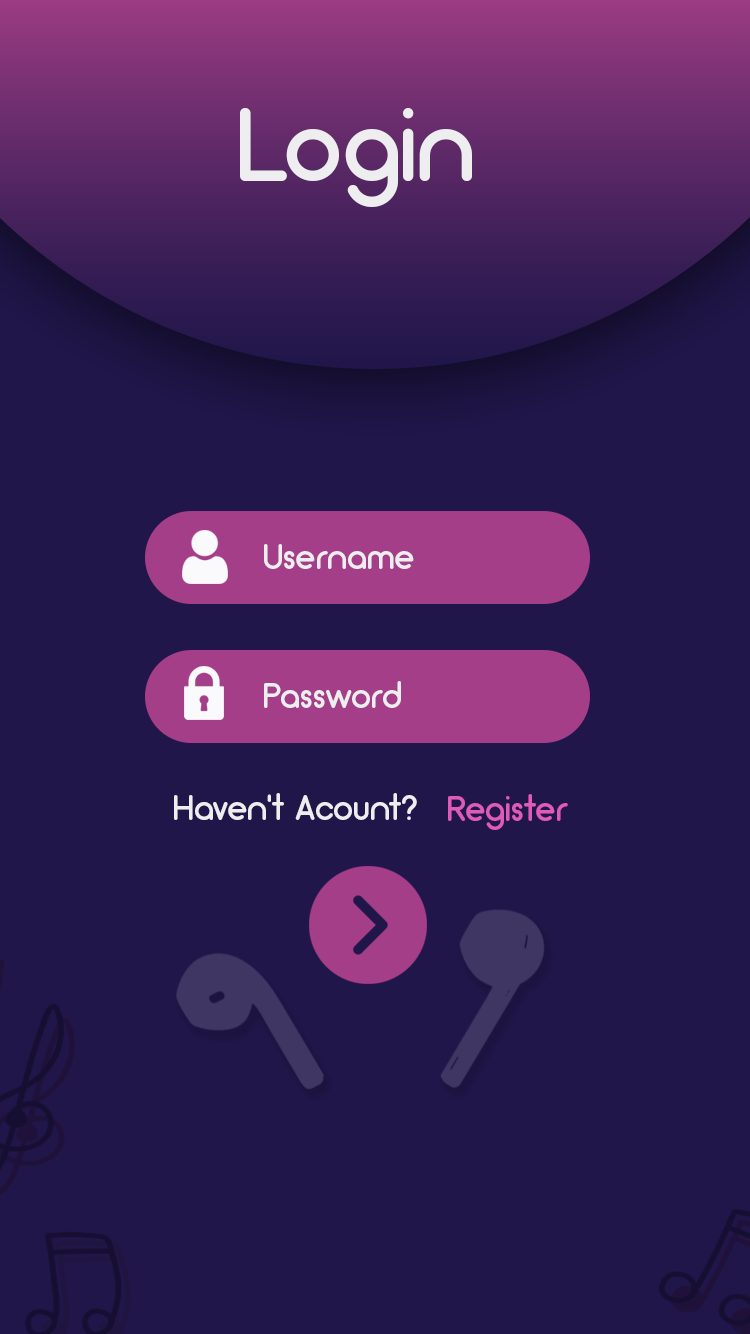
<style>
.page{position:relative;width:750px;height:1334px;background:#20164a}
.page>*{position:absolute;margin:0}
.t1{font:104.3px "Arciform";color:#eeeef0}
.t2{font:36px "Arciform";color:#eeeef0}
.t3{font:36px "Arciform";color:#de5bba}
</style>
<div class="page">
<p class="t1" style="left:240px;top:108px;width:232px;height:99px">Login</p>
<p class="t2" style="left:264px;top:544px;width:150px;height:25px">Username</p>
<p class="t2" style="left:264px;top:681px;width:137px;height:27px">Password</p>
<p class="t2" style="left:174px;top:793px;width:243px;height:27px">Haven’t Acount?</p>
<p class="t3" style="left:448px;top:794px;width:120px;height:36px">Register</p>
</div>
